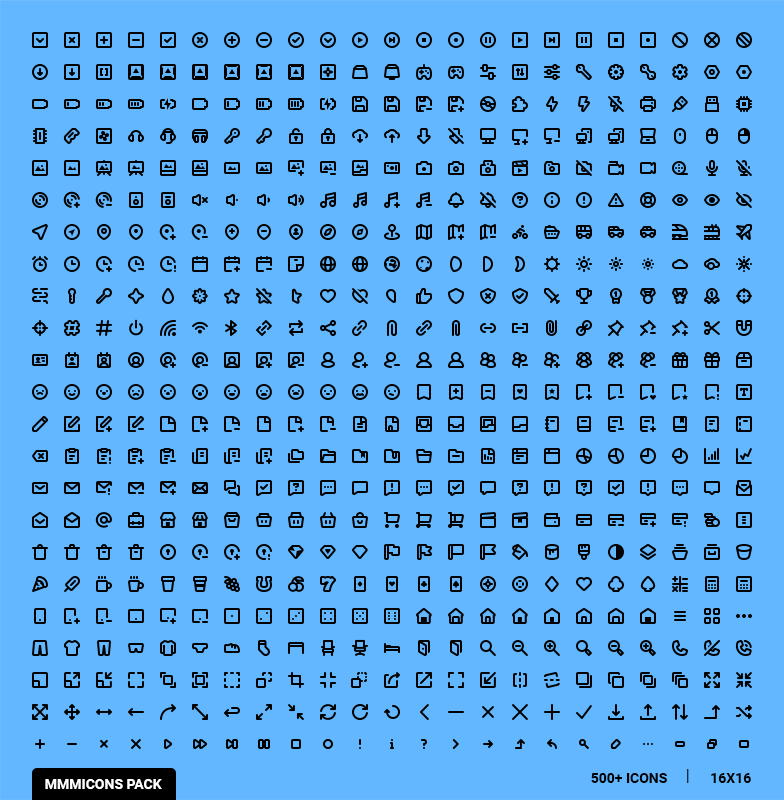
<style>
.page{position:relative;width:784px;height:800px;background:#63b7ff}
.page>*{position:absolute;margin:0}
.t1{font:14px "Roboto-Bold";color:#000000;text-transform:uppercase}
.t2{font:18px "Roboto-Light";color:#000000}
.t3{font:14px "Roboto-Bold";color:#ffffff;text-transform:uppercase}
</style>
<div class="page">
<p class="t1" style="left:591px;top:769px;width:160px;height:14px">500+ icons     <span class="t2">l   </span>  16x16</p>
<p class="t3" style="left:45px;top:779px;width:117px;height:10px">mmmicons pack</p>
</div>
